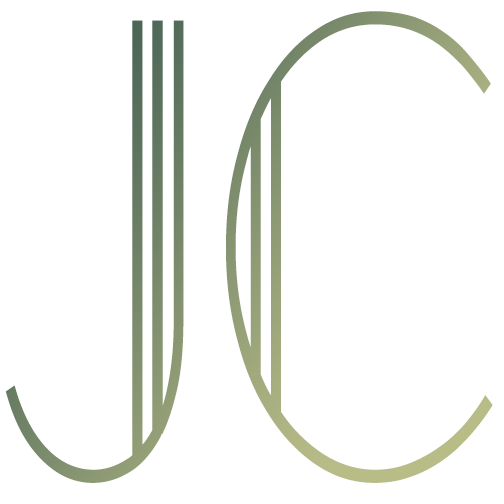
<style>
.page{position:relative;width:504px;height:504px;background:#ffffff}
.page>*{position:absolute;margin:0}
.t1{font:540.1px "HazelDecoLight-Regular";letter-spacing:-0.15em;scale:0.83 1}
</style>
<div class="page">
<p class="t1" style="left:5px;top:11px;width:488px;height:472px">JC</p>
</div>
